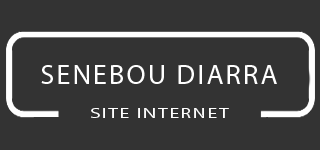
<style>
.page{position:relative;width:320px;height:150px;background:#333333}
.page>*{position:absolute;margin:0}
.t1{font:28px "MyriadPro-Regular";letter-spacing:0.08em;color:#ffffff}
.t2{font:13.9px "MyriadPro-Regular";letter-spacing:0.08em;color:#ffffff;scale:1.43 1}
</style>
<div class="page">
<p class="t1" style="left:41px;top:65px;width:236px;height:19px">SENEBOU DIARRA</p>
<p class="t2" style="left:91px;top:108px;width:138px;height:10px">SITE INTERNET</p>
</div>
